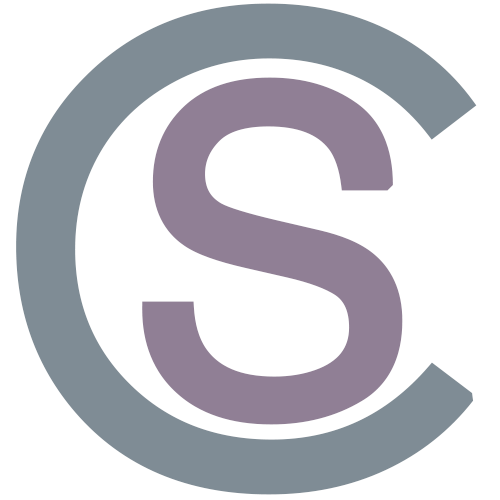
<style>
.page{position:relative;width:500px;height:500px;background:#ffffff}
.page>*{position:absolute;margin:0}
.t1{font:636.6px "CenturyGothic";color:#7f8c95;font-weight:bold}
.t2{font:445.7px "Helvetica";color:#907f95;font-weight:bold}
</style>
<div class="page">
<p class="t1" style="left:16px;top:3px;width:461px;height:492px">C</p>
<p class="t2" style="left:142px;top:77px;width:261px;height:348px">S</p>
</div>
